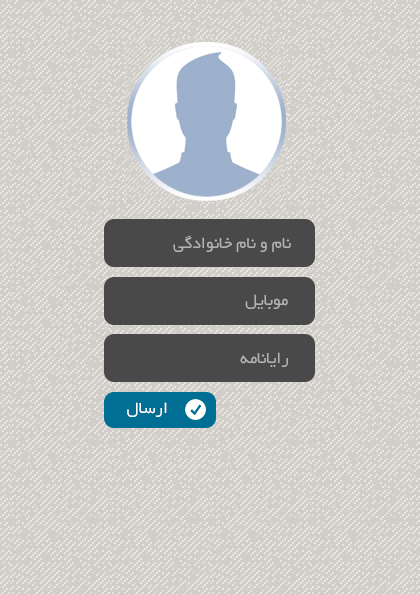
<style>
.page{position:relative;width:420px;height:595px;background:#d1ceca}
.page>*{position:absolute;margin:0}
.t1{font:18px "BYekan";color:#b3b3b3}
.t2{font:18px "BYekan";color:#ffffff}
</style>
<div class="page">
<p class="t1" style="left:173px;top:235px;width:118px;height:17px">نام و نام خانوادگی</p>
<p class="t1" style="left:245px;top:294px;width:43px;height:15px">موبایل</p>
<p class="t1" style="left:240px;top:352px;width:48px;height:15px">رایانامه</p>
<p class="t2" style="left:127px;top:402px;width:40px;height:15px">ارسال</p>
</div>
